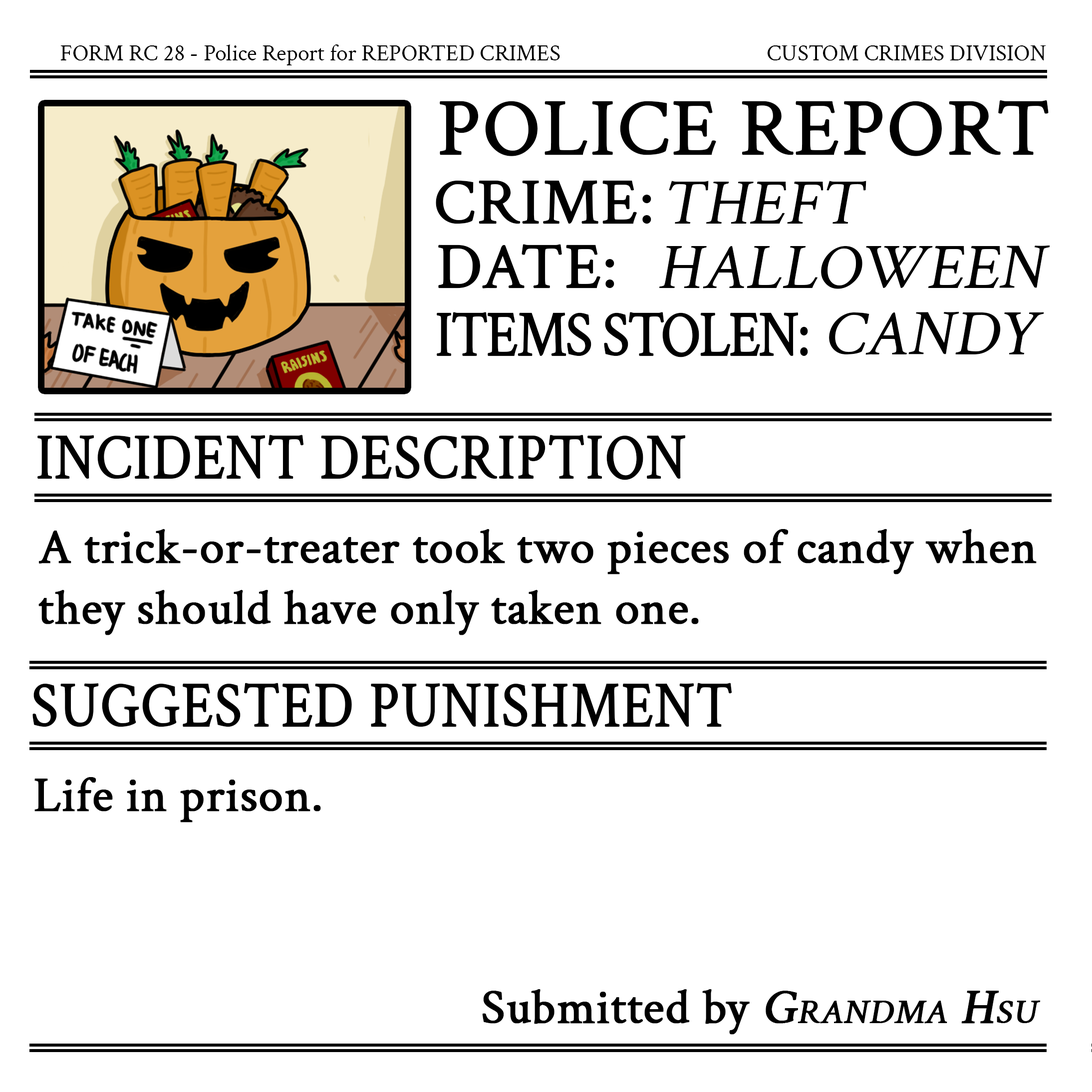
<style>
.page{position:relative;width:1092px;height:1092px;background:#ffffff}
.page>*{position:absolute;margin:0}
.t1{font:22.9px "CrimsonText-Regular";color:#000000}
.t2{font:80.9px "CrimsonText-Regular";color:#000000;font-variant:small-caps;font-weight:bold}
.t3{font:64.6px "CrimsonText-Regular";color:#000000;font-variant:small-caps;font-weight:bold}
.t4{font:64.6px "CrimsonText-Regular";color:#000000;font-variant:small-caps;font-style:italic}
.t5{font:64.7px "CrimsonText-Regular";letter-spacing:-0.05em;color:#000000;font-variant:small-caps;font-weight:bold;scale:0.87 1}
.t6{font:64.7px "CrimsonText-Regular";color:#000000;font-variant:small-caps;font-weight:bold;scale:0.87 1}
.t7{font:48.8px/61px "CrimsonText-Regular";color:#000000;font-weight:bold}
.t8{font:48.8px "CrimsonText-Regular";color:#000000;font-weight:bold}
.t9{font:48.8px "CrimsonText-Regular";color:#000000;font-variant:small-caps;font-weight:bold;font-style:italic}
</style>
<div class="page">
<p class="t1" style="left:60px;top:44px;width:500px;height:21px">FORM RC 28 - Police Report for REPORTED CRIMES</p>
<p class="t1" style="left:768px;top:45px;width:278px;height:16px">CUSTOM CRIMES DIVISION</p>
<p class="t2" style="left:440px;top:100px;width:609px;height:56px">POLICE REPORT</p>
<p class="t3" style="left:436px;top:180px;width:215px;height:44px">CRIME:</p>
<p class="t4" style="left:669px;top:181px;width:197px;height:43px">THEFT</p>
<p class="t3" style="left:438px;top:244px;width:176px;height:44px">DATE:</p>
<p class="t4" style="left:659px;top:245px;width:391px;height:44px">HALLOWEEN</p>
<p class="t5" style="left:437px;top:312px;width:371px;height:45px">ITEMS STOLEN:</p>
<p class="t4" style="left:829px;top:311px;width:215px;height:44px">CANDY</p>
<p class="t6" style="left:37px;top:435px;width:649px;height:45px">INCIDENT DESCRIPTION</p>
<p class="t7" style="left:38px;top:529px;width:999px;height:106px">A trick-or-treater took two pieces of candy when<br>they should have only taken one.</p>
<p class="t6" style="left:32px;top:683px;width:700px;height:44px">SUGGESTED PUNISHMENT</p>
<p class="t8" style="left:34px;top:777px;width:287px;height:45px">Life in prison.</p>
<p class="t8" style="left:482px;top:989px;width:559px;height:46px">Submitted by <span class="t9">Grandma Hsu</span></p>
</div>
